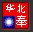
<style>
.page{position:relative;width:33px;height:32px;background:#f20000}
.page>*{position:absolute;margin:0}
.t1{font:10.4px "SimSun";color:#ffffff}
.t2{font:11.7px "SimSun";color:#ffffff}
</style>
<div class="page">
<p class="t1" style="left:6px;top:4px;width:19px;height:9px">华北</p>
<p class="t2" style="left:16px;top:15px;width:11px;height:12px">奉</p>
</div>
